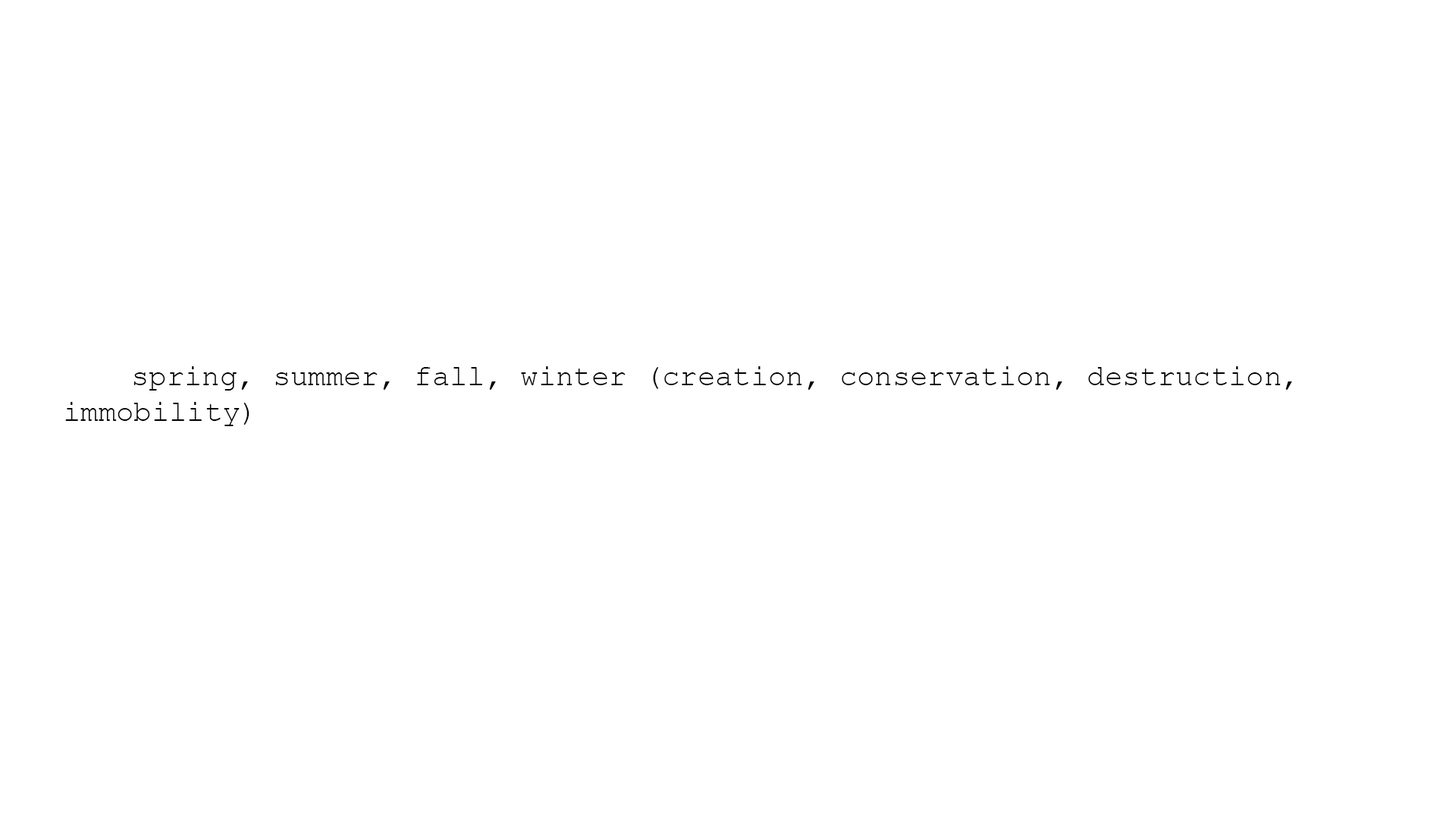
<style>
.page{position:relative;width:1456px;height:819px;background:#ffffff}
.page>*{position:absolute;margin:0}
.t1{font:29.5px "CourierNewPSMT";color:#000000}
.t2{font:37.9px "CourierNewPSMT";color:#000000}
</style>
<div class="page">
<p class="t1" style="left:65px;top:366px;width:1227px;height:60px"><span class="t2"><br>   </span>spring, summer, fall, winter (creation, conservation, destruction, <br>immobility)</p>
</div>
